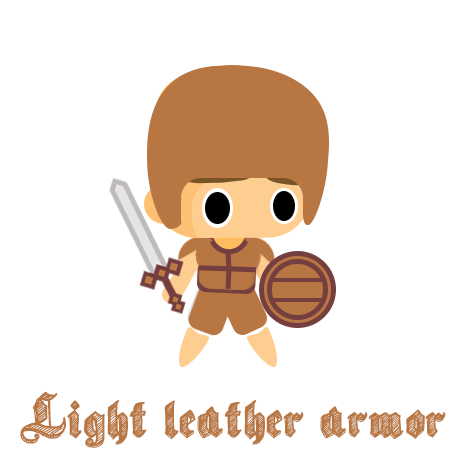
<style>
.page{position:relative;width:460px;height:460px;background:#ffffff}
.page>*{position:absolute;margin:0}
.t1{font:62.3px "SketchGothicSchool";color:#b87642}
</style>
<div class="page">
<p class="t1" style="left:20px;top:391px;width:426px;height:57px">Light leather armor</p>
</div>
